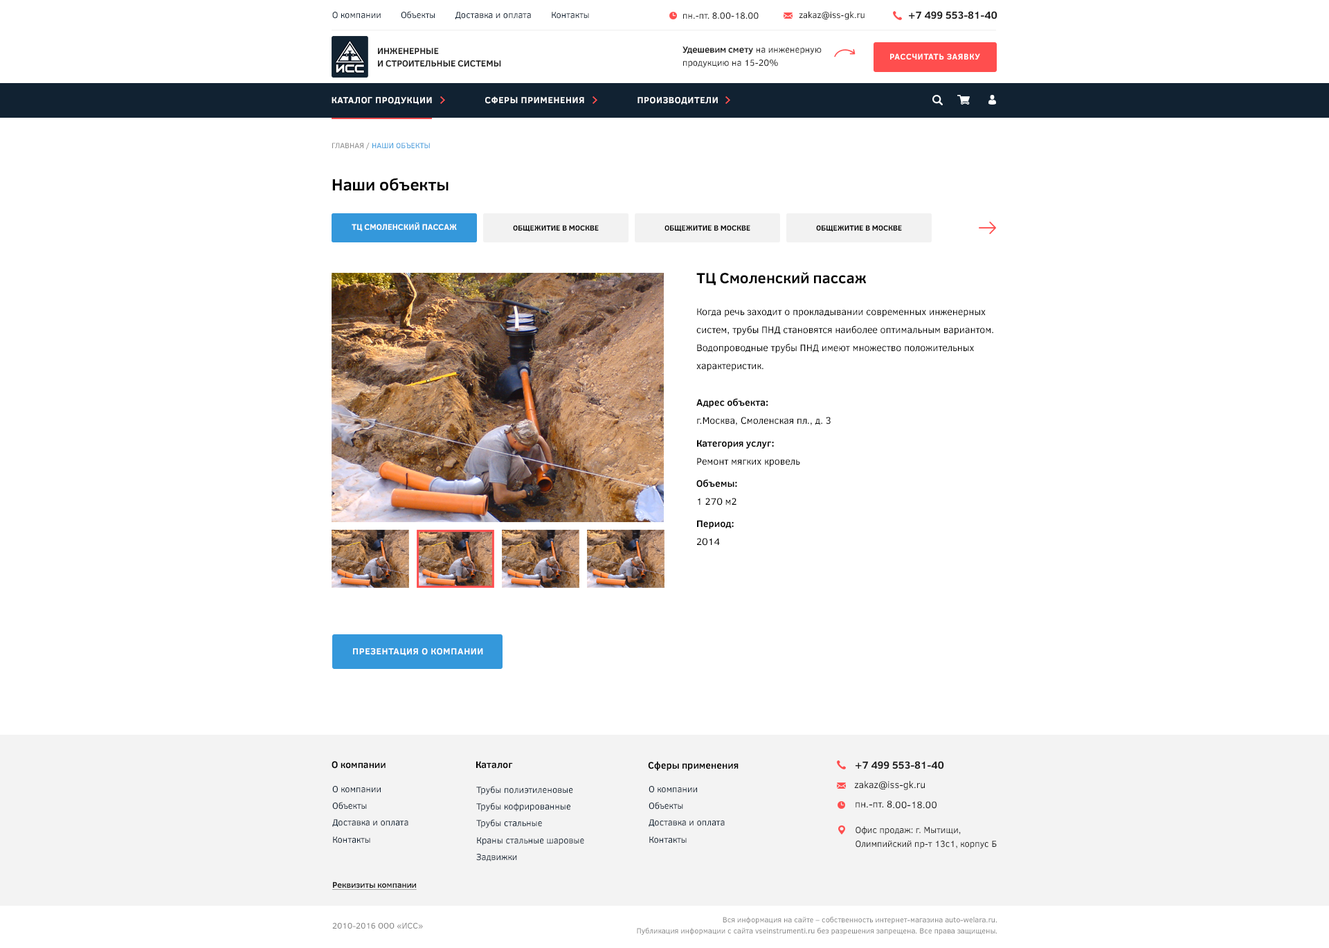
<style>
.page{position:relative;width:1329px;height:948px;background:#ffffff}
.page>*{position:absolute;margin:0}
.t1{font:9px "ClearSans";color:#112232}
.t2{font:9px "ClearSans";color:#1e1e1e}
.t3{font:10.4px "ClearSans-Bold";color:#1e1e1e;text-transform:uppercase}
.t4{font:9px/9.7px "ClearSans-Bold";color:#1e1e1e}
.t5{font:9px/10.4px "ClearSans";color:#1e1e1e}
.t6{font:9px/10.4px "ClearSans-Bold";color:#1e1e1e}
.t7{font:8.3px "ClearSans-Bold";letter-spacing:0.05em;color:#ffffff;text-transform:uppercase}
.t8{font:9px "ClearSans-Bold";letter-spacing:0.05em;color:#ffffff;text-transform:uppercase}
.t9{font:7.6px "ClearSans";color:#3498db;text-transform:uppercase}
.t10{font:7.6px "ClearSans";color:#888888}
.t11{font:16.6px "ClearSans-Bold";color:#000000}
.t12{font:8.3px "ClearSans-Bold";color:#ffffff;text-transform:uppercase}
.t13{font:7.6px "ClearSans-Bold";color:#000000;text-transform:uppercase}
.t14{font:15.2px "ClearSans-Bold";color:#000000}
.t15{font:9.7px/18px "ClearSans";color:#000000}
.t16{font:9.7px/15.2px "ClearSans";color:#000000}
.t17{font:9.7px/15.2px "ClearSans-Bold";color:#000000}
.t18{font:9.7px/19.4px "ClearSans-Bold";color:#000000}
.t19{font:9.7px "ClearSans-Bold";color:#000000}
.t20{font:9px/13.8px "ClearSans";color:#112232}
.t21{font:9.7px "ClearSans";color:#1e1e1e}
.t22{font:9px/13.8px "ClearSans";color:#1e1e1e}
.t23{font:8.3px "ClearSans-Bold";color:#1e1e1e;text-decoration:underline}
.t24{font:7.6px/8.3px "ClearSans";color:#858585}
.t25{font:8.3px "ClearSans";color:#858585}
</style>
<div class="page">
<p class="t1" style="left:332px;top:11px;width:257px;height:8px">О компании        Объекты        Доставка и оплата        Контакты</p>
<p class="t2" style="left:683px;top:12px;width:76px;height:7px">пн.-пт. 8.00-18.00</p>
<p class="t2" style="left:799px;top:11px;width:66px;height:9px">zakaz@iss-gk.ru</p>
<p class="t3" style="left:909px;top:11px;width:89px;height:8px">+7 499 553-81-40</p>
<p class="t4" style="left:378px;top:48px;width:123px;height:19px">ИНЖЕНЕРНЫЕ<br>И СТРОИТЕЛЬНЫЕ СИСТЕМЫ</p>
<p class="t5" style="left:683px;top:46px;width:139px;height:22px"><span class="t6">Удешевим смету</span> на инженерную<br>продукцию на 15-20%</p>
<p class="t7" style="left:890px;top:53px;width:90px;height:7px">рассчитать заявку</p>
<p class="t8" style="left:332px;top:96px;width:386px;height:9px">каталог продукции                    Сферы применения                    производители</p>
<p class="t9" style="left:332px;top:143px;width:98px;height:7px"><span class="t10">ГЛАВНАЯ / </span>наши объекты</p>
<p class="t11" style="left:332px;top:178px;width:117px;height:13px">Наши объекты</p>
<p class="t12" style="left:352px;top:222px;width:105px;height:9px">тц Смоленский пассаж</p>
<p class="t13" style="left:513px;top:225px;width:86px;height:7px">Общежитие в москве</p>
<p class="t13" style="left:665px;top:225px;width:85px;height:7px">Общежитие в москве</p>
<p class="t13" style="left:816px;top:225px;width:86px;height:7px">Общежитие в москве</p>
<p class="t14" style="left:696px;top:272px;width:171px;height:13px">ТЦ Смоленский пассаж</p>
<p class="t15" style="left:696px;top:308px;width:297px;height:63px">Когда речь заходит о прокладывании современных инженерных систем, трубы ПНД становятся наиболее оптимальным вариантом. Водопроводные трубы ПНД имеют множество положительных характеристик.</p>
<p class="t16" style="left:696px;top:398px;width:135px;height:148px"><span class="t17">Адрес объекта:<br></span>г.Москва, Смоленская пл., д. 3<br><span class="t18">Категория услуг:<br></span>Ремонт мягких кровель<br><span class="t18">Объемы:<br></span>1 270 м2<br><span class="t18">Период:<br></span>2014</p>
<p class="t8" style="left:353px;top:648px;width:130px;height:8px">Презентация о компании</p>
<p class="t19" style="left:332px;top:761px;width:54px;height:7px">О компании</p>
<p class="t19" style="left:476px;top:761px;width:37px;height:7px">Каталог</p>
<p class="t19" style="left:648px;top:761px;width:91px;height:10px">Сферы применения</p>
<p class="t3" style="left:856px;top:761px;width:88px;height:8px">+7 499 553-81-40</p>
<p class="t20" style="left:332px;top:786px;width:76px;height:57px">О компании<br>Объекты<br>Доставка и оплата<br>Контакты</p>
<p class="t20" style="left:476px;top:786px;width:108px;height:75px">Трубы полиэтиленовые<br>Трубы кофрированные<br>Трубы стальные<br>Краны стальные шаровые<br>Задвижки</p>
<p class="t20" style="left:649px;top:786px;width:76px;height:57px">О компании<br>Объекты<br>Доставка и оплата<br>Контакты</p>
<p class="t21" style="left:854px;top:780px;width:71px;height:10px">zakaz@iss-gk.ru</p>
<p class="t21" style="left:856px;top:800px;width:81px;height:9px">пн.-пт. 8.00-18.00</p>
<p class="t22" style="left:856px;top:826px;width:141px;height:23px">Офис продаж: г. Мытищи, Олимпийский пр-т 13с1, корпус Б</p>
<p class="t23" style="left:332px;top:881px;width:85px;height:9px">Реквизиты компании</p>
<p class="t24" style="left:637px;top:917px;width:360px;height:18px;text-align:right">Вся информация на сайте – собственность интернет-магазина auto-welara.ru.<br>Публикация информации с сайта vseinstrumenti.ru без разрешения запрещена. Все права защищены.</p>
<p class="t25" style="left:332px;top:922px;width:91px;height:6px">2010-2016 ООО «ИСС»</p>
</div>
